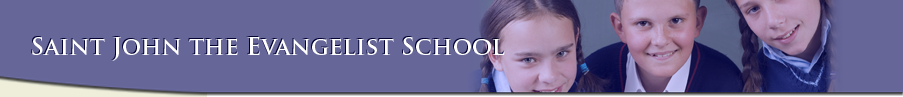
<style>
.page{position:relative;width:903px;height:97px;background:#666699}
.page>*{position:absolute;margin:0}
.t1{font:24px "TrajanPro-Bold";color:#ffffff}
</style>
<div class="page">
<p class="t1" style="left:32px;top:37px;width:473px;height:24px">Saint John the Evangelist School</p>
</div>
